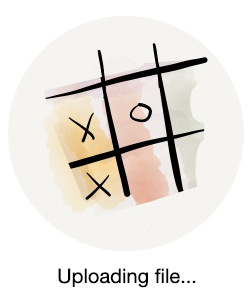
<style>
.page{position:relative;width:252px;height:298px;background:#ffffff}
.page>*{position:absolute;margin:0}
.t1{font:20px "HelveticaNeue";color:#000000}
</style>
<div class="page">
<p class="t1" style="left:58px;top:268px;width:138px;height:20px">Uploading file...</p>
</div>
